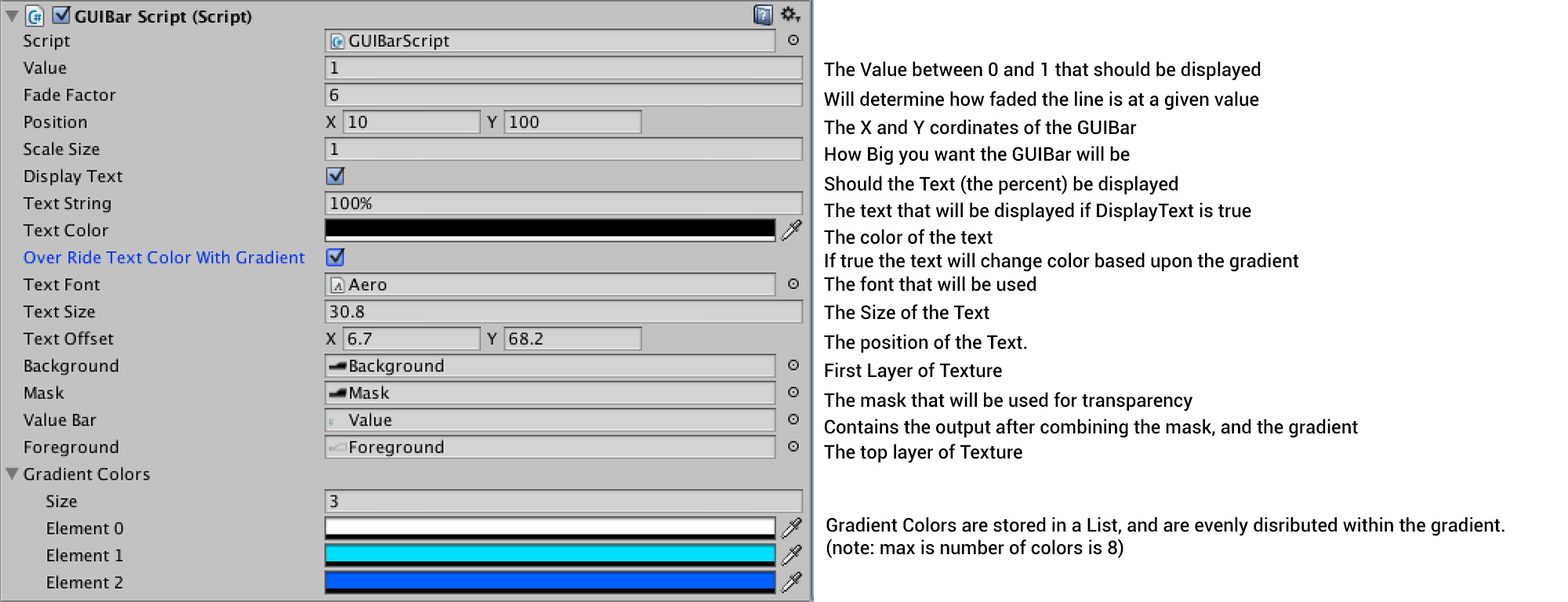
<style>
.page{position:relative;width:1568px;height:602px;background:#ffffff}
.page>*{position:absolute;margin:0}
.t1{font:18.8px "Roboto-Medium";color:#000000}
.t2{font:9.4px "Roboto-Medium";color:#000000}
</style>
<div class="page">
<p class="t1" style="left:824px;top:61px;width:437px;height:20px">The Value between 0 and 1 that should be displayed</p>
<p class="t1" style="left:824px;top:91px;width:435px;height:20px">Will determine how faded the line is at a given value</p>
<p class="t1" style="left:824px;top:119px;width:313px;height:16px">The X and Y cordinates of the GUIBar</p>
<p class="t1" style="left:825px;top:146px;width:305px;height:19px">How Big you want the GUIBar will be</p>
<p class="t1" style="left:825px;top:175px;width:353px;height:20px">Should the Text (the percent) be displayed</p>
<p class="t1" style="left:824px;top:202px;width:427px;height:20px">The text that will be displayed if DisplayText is true</p>
<p class="t1" style="left:824px;top:229px;width:169px;height:16px">The color of the text</p>
<p class="t1" style="left:825px;top:252px;width:474px;height:20px">If true the text will change color based upon the gradient</p>
<p class="t1" style="left:824px;top:276px;width:212px;height:16px">The font that will be used</p>
<p class="t1" style="left:824px;top:304px;width:165px;height:16px">The Size of the Text</p>
<p class="t1" style="left:824px;top:334px;width:203px;height:19px">The position of the Text.</p>
<p class="t1" style="left:825px;top:362px;width:177px;height:20px">First Layer of Texture</p>
<p class="t1" style="left:824px;top:392px;width:369px;height:20px">The mask that will be used for transparency</p>
<p class="t1" style="left:825px;top:419px;width:533px;height:19px">Contains the output after combining the mask, and the gradient</p>
<p class="t1" style="left:824px;top:444px;width:198px;height:19px">The top layer of Texture</p>
<p class="t2" style="left:826px;top:517px;width:678px;height:41px">Gradient Colors are stored in a List, and are evenly disributed within the gradient.<br>(note: max is number of colors is 8)</p>
</div>
